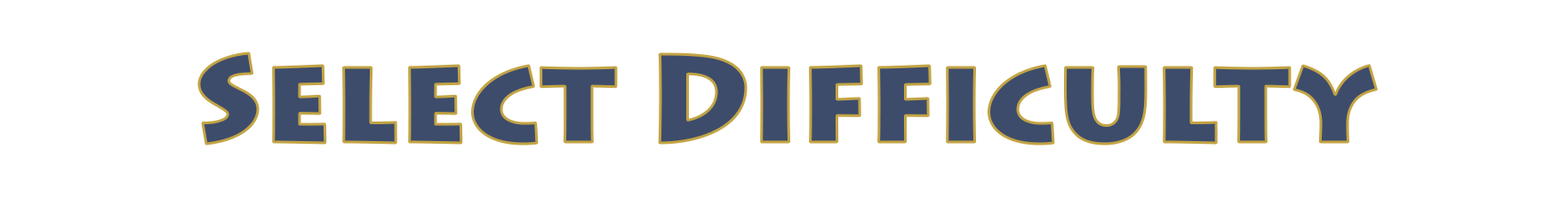
<style>
.page{position:relative;width:1568px;height:197px;background:#ffffff}
.page>*{position:absolute;margin:0}
.t1{font:123.6px "LithosPro-Black";color:#3d4c6b}
</style>
<div class="page">
<p class="t1" style="left:199px;top:53px;width:1178px;height:91px">Select Difficulty</p>
</div>
